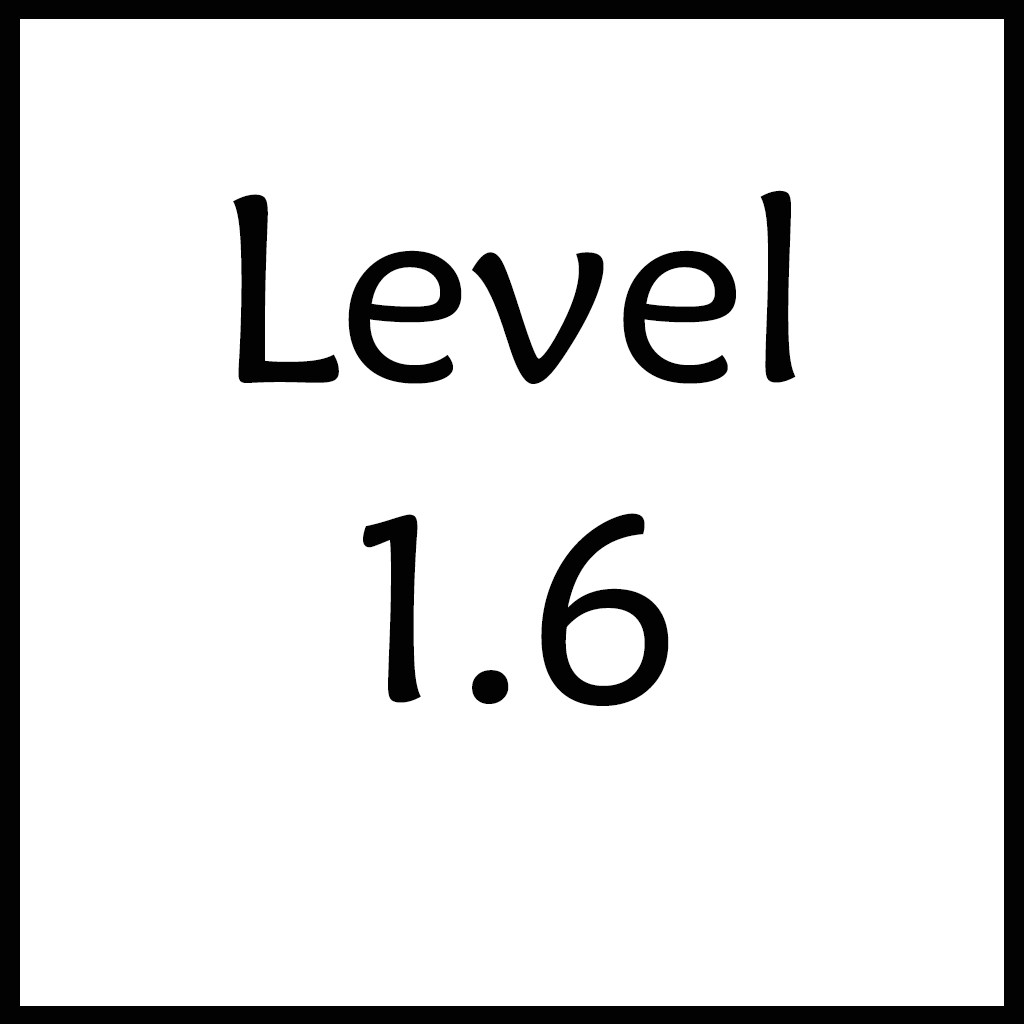
<style>
.page{position:relative;width:1024px;height:1024px;background:#ffffff}
.page>*{position:absolute;margin:0}
.t1{font:266.7px "MaiandraGD-Regular";color:#020202}
</style>
<div class="page">
<p class="t1" style="left:233px;top:190px;width:563px;height:516px;text-align:center">Level <br>1.6</p>
</div>
